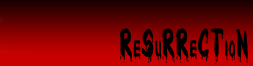
<style>
.page{position:relative;width:253px;height:66px}
.page>*{position:absolute;margin:0}
.t1{font:36px "Bloody";letter-spacing:0.06em;color:#000000;scale:0.67 1}
.t2{font:21px "Bloody";letter-spacing:0.06em;color:#000000;scale:0.67 1}
</style>
<div class="page">
<p class="t1" style="left:120px;top:28px;width:128px;height:37px">R<span class="t2">e</span>S<span class="t2">u</span>RR<span class="t2">e</span>CT<span class="t2">io</span>N</p>
</div>
